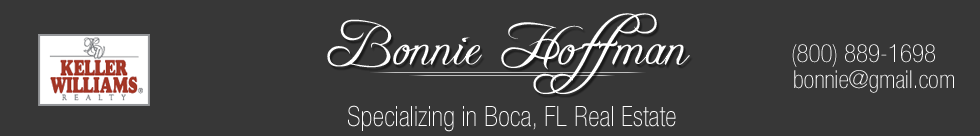
<style>
.page{position:relative;width:980px;height:136px;background:#373737}
.page>*{position:absolute;margin:0}
.t1{font:57px "FreebooterScript";color:#ffffff}
.t2{font:25px "HelveticaNeue-ThinCond";color:#ffffff}
.t3{font:28px "HelveticaNeue-ThinCond";color:#ffffff}
</style>
<div class="page">
<p class="t1" style="left:327px;top:13px;width:363px;height:81px">Bonnie Hoffman</p>
<p class="t2" style="left:792px;top:44px;width:143px;height:23px">(800) 889-1698</p>
<p class="t2" style="left:794px;top:70px;width:160px;height:23px">bonnie@gmail.com</p>
<p class="t3" style="left:348px;top:105px;width:328px;height:27px">Specializing in Boca, FL Real Estate</p>
</div>
